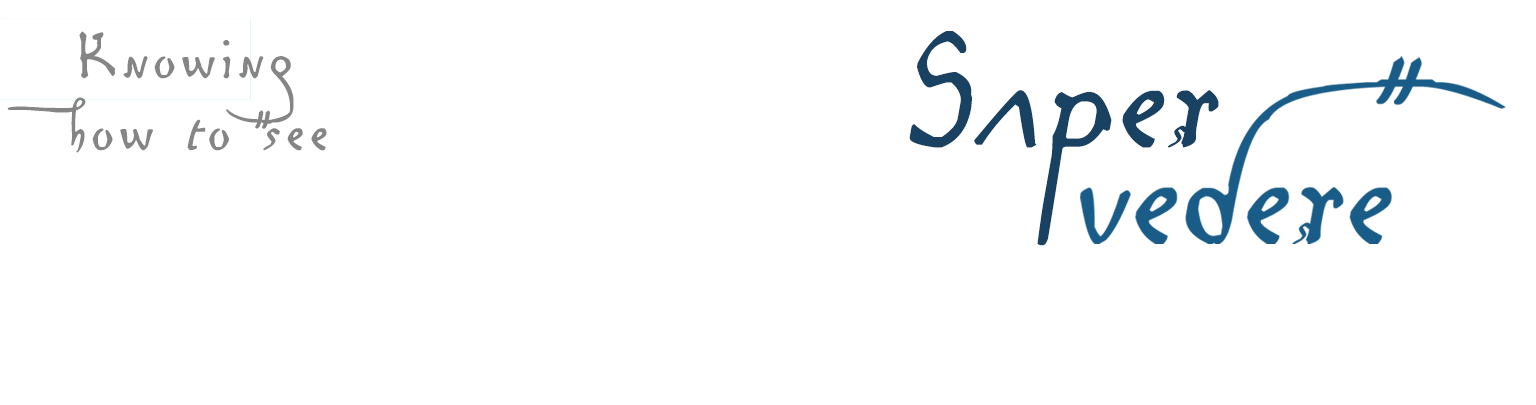
<style>
.page{position:relative;width:1536px;height:405px;background:#ffffff}
.page>*{position:absolute;margin:0}
.t1{font:90px/72px "LeonardoHandF";letter-spacing:0.05em;color:#858585}
.t2{font:233.7px "LeonardoHandF";color:#194162;font-style:italic}
</style>
<div class="page">
<p class="t1" style="left:7px;top:31px;width:320px;height:122px;text-align:center">Knowing <br>how to see</p>
<p class="t2" style="left:909px;top:31px;width:310px;height:215px">Saper</p>
</div>
